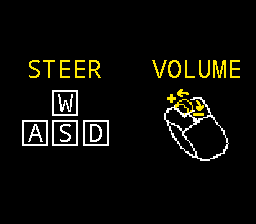
<style>
.page{position:relative;width:256px;height:224px;background:#000000}
.page>*{position:absolute;margin:0}
.t1{font:25px "NotoMono";color:#ffea00}
.t2{font:25px "NotoMono";color:#ffffff}
</style>
<div class="page">
<p class="t1" style="left:29px;top:60px;width:72px;height:18px">STEER</p>
<p class="t1" style="left:152px;top:60px;width:88px;height:18px">VOLUME</p>
<p class="t2" style="left:28px;top:94px;width:74px;height:48px;text-align:center">W<br>A S D</p>
</div>
